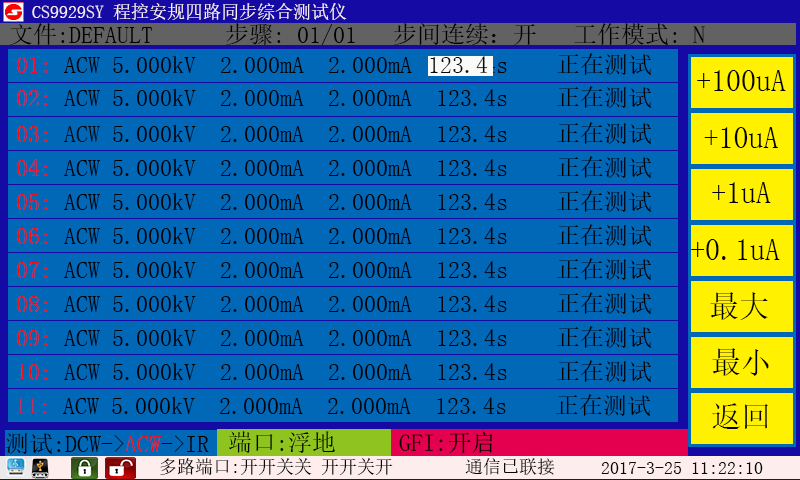
<style>
.page{position:relative;width:800px;height:480px;background:#0068b7}
.page>*{position:absolute;margin:0}
.t1{font:18px "SimSun";color:#f9ecec}
.t2{font:24px "SimSun";color:#000000}
.t3{font:24px "SimSun";color:#f1072d}
.t4{font:24px "SimSun";color:#090a09}
.t5{font:30px "SimSun";color:#000000}
.t6{font:24px "SimSun";color:#f30c2d}
.t7{font:24px "SimSun";color:#fd0707}
.t8{font:24px "SimSun";color:#0b0808}
.t9{font:24px "SimSun";color:#f60729}
.t10{font:24px "SimSun";color:#f30a0f}
.t11{font:23.7px "SimSun";color:#000000}
.t12{font:18px "SimSun";color:#080808}
</style>
<div class="page">
<p class="t1" style="left:32px;top:3px;width:315px;height:17px">CS9929SY 程控安规四路同步综合测试仪</p>
<p class="t2" style="left:10px;top:23px;width:695px;height:22px">文件:DEFAULT  步骤: 01/01   步间连续：开   工作模式: N</p>
<p class="t2" style="left:17px;top:53px;width:634px;height:22px"><span class="t3"> 01:</span> ACW 5.000kV  2.000mA  2.000mA  123.4s    正在测试工</p>
<p class="t4" style="left:430px;top:56px;width:58px;height:17px">123.4</p>
<p class="t5" style="left:697px;top:70px;width:89px;height:21px">+100uA</p>
<p class="t2" style="left:17px;top:86px;width:634px;height:22px"><span class="t6"> 02:</span> ACW 5.000kV  2.000mA  2.000mA  123.4s    正在测试工</p>
<p class="t2" style="left:17px;top:122px;width:634px;height:22px"><span class="t7">03: </span><span class="t8">ACW </span>5.000kV  2.000mA  2.000mA  123.4s    正在测试工</p>
<p class="t5" style="left:704px;top:127px;width:74px;height:21px">+10uA</p>
<p class="t2" style="left:17px;top:156px;width:634px;height:22px"><span class="t7">04:</span> ACW 5.000kV  2.000mA  2.000mA  123.4s    正在测试工</p>
<p class="t5" style="left:712px;top:182px;width:59px;height:21px">+1uA</p>
<p class="t2" style="left:17px;top:190px;width:634px;height:22px"><span class="t7">05:</span> ACW 5.000kV  2.000mA  2.000mA  123.4s    正在测试工</p>
<p class="t2" style="left:17px;top:224px;width:634px;height:22px"><span class="t7">06:</span> ACW 5.000kV  2.000mA  2.000mA  123.4s    正在测试工</p>
<p class="t5" style="left:691px;top:239px;width:89px;height:21px">+0.1uA</p>
<p class="t2" style="left:17px;top:258px;width:634px;height:22px"><span class="t7">07:</span> ACW 5.000kV  2.000mA  2.000mA  123.4s    正在测试工</p>
<p class="t2" style="left:17px;top:292px;width:634px;height:22px"><span class="t7"> 08:</span> ACW 5.000kV  2.000mA  2.000mA  123.4s    正在测试工</p>
<p class="t5" style="left:710px;top:292px;width:58px;height:28px">最大</p>
<p class="t2" style="left:17px;top:326px;width:634px;height:22px"><span class="t7">09:</span> ACW 5.000kV  2.000mA  2.000mA  123.4s    正在测试工</p>
<p class="t5" style="left:712px;top:348px;width:57px;height:28px">最小</p>
<p class="t2" style="left:18px;top:360px;width:633px;height:22px"><span class="t7">10:</span> ACW 5.000kV  2.000mA  2.000mA  123.4s    正在测试工</p>
<p class="t2" style="left:17px;top:394px;width:633px;height:22px"><span class="t9">11:</span> ACW 5.000kV  2.000mA  2.000mA  123.4s    正在测试工</p>
<p class="t5" style="left:712px;top:403px;width:56px;height:26px">返回</p>
<p class="t2" style="left:6px;top:433px;width:203px;height:21px">测试:DCW-&gt;<span class="t10">ACW</span>-&gt;IR</p>
<p class="t2" style="left:229px;top:431px;width:106px;height:22px">端口:浮地</p>
<p class="t11" style="left:399px;top:431px;width:94px;height:23px">GFI:开启</p>
<p class="t12" style="left:160px;top:458px;width:233px;height:17px">多路端口:开开关关 开开关开</p>
<p class="t12" style="left:465px;top:458px;width:90px;height:17px">通信已联接</p>
<p class="t12" style="left:601px;top:462px;width:162px;height:12px">2017-3-25 11:22:10</p>
</div>
